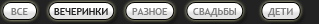
<style>
.page{position:relative;width:319px;height:24px}
.page>*{position:absolute;margin:0}
.t1{font:10px "TrebuchetMS";color:#7f7f7f}
.t2{font:10px "TrebuchetMS";color:#222222}
</style>
<div class="page">
<p class="t1" style="left:11px;top:8px;width:17px;height:7px">ВСЕ</p>
<p class="t2" style="left:54px;top:8px;width:54px;height:7px">ВЕЧЕРИНКИ</p>
<p class="t1" style="left:132px;top:8px;width:36px;height:7px">РАЗНОЕ</p>
<p class="t1" style="left:193px;top:8px;width:43px;height:9px">СВАДЬБЫ</p>
<p class="t1" style="left:267px;top:8px;width:26px;height:9px">ДЕТИ</p>
</div>
